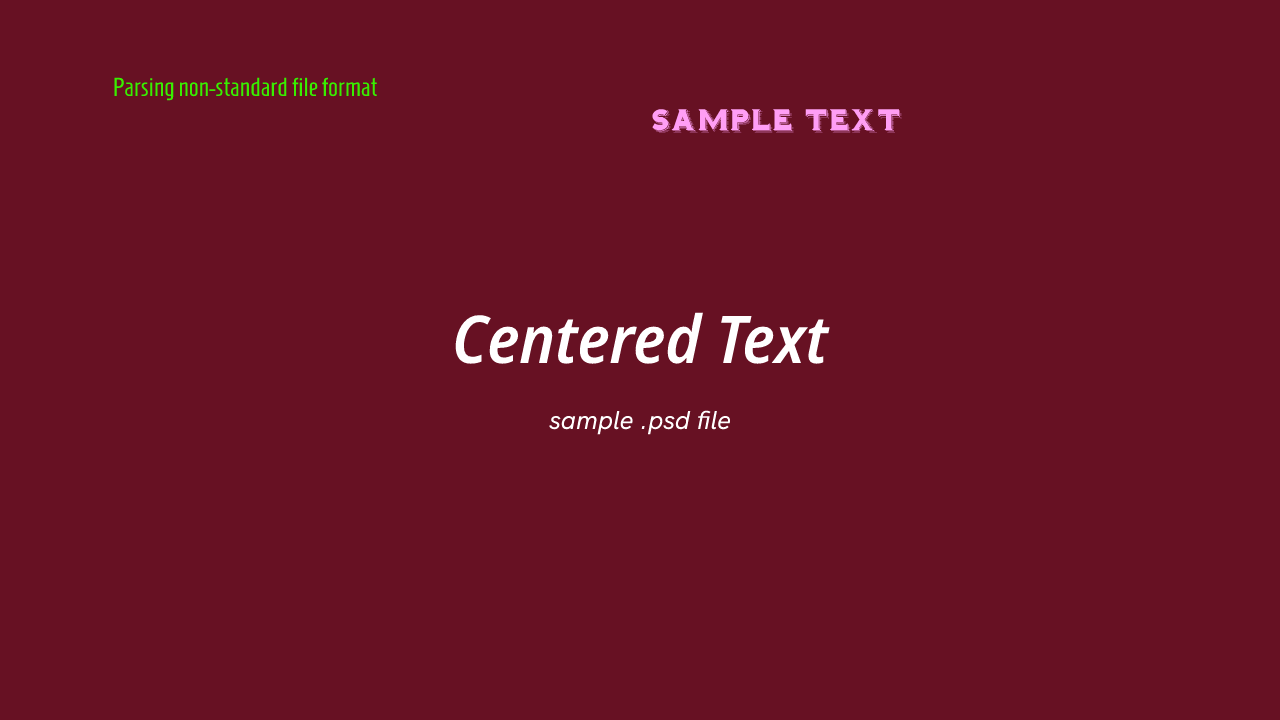
<style>
.page{position:relative;width:1280px;height:720px;background:#671123}
.page>*{position:absolute;margin:0}
.t1{font:26px "Homenaje-Regular";color:#38ef00}
.t2{font:26px "Hominis";color:#ff9ef5}
.t3{font:66px "NotoSans-SemiCondensedSemiBoldItalic";color:#ffffff}
.t4{font:26px "HKGrotesk-MediumItalic";color:#ffffff}
</style>
<div class="page">
<p class="t1" style="left:114px;top:77px;width:263px;height:24px">Parsing non-standard file format</p>
<p class="t2" style="left:652px;top:109px;width:250px;height:24px">SAMPLE TEXT</p>
<p class="t3" style="left:455px;top:312px;width:375px;height:52px">Centered Text</p>
<p class="t4" style="left:549px;top:410px;width:182px;height:25px">sample .psd file</p>
</div>
